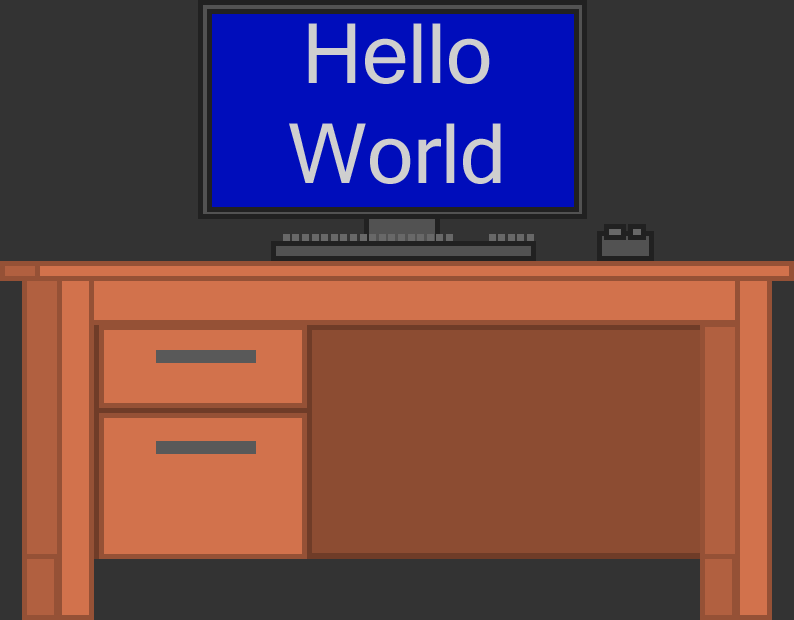
<style>
.page{position:relative;width:794px;height:620px;background:#333333}
.page>*{position:absolute;margin:0}
.t1{font:83.3px "MicrosoftSansSerif";color:#cfcfcf}
</style>
<div class="page">
<p class="t1" style="left:289px;top:23px;width:212px;height:161px;text-align:center">Hello World</p>
</div>
